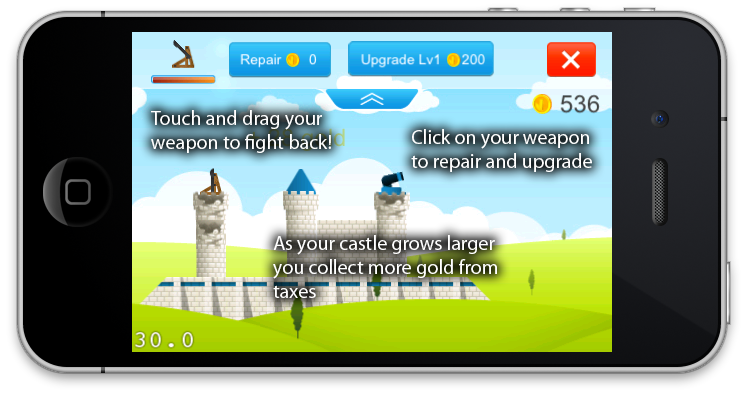
<style>
.page{position:relative;width:744px;height:396px}
.page>*{position:absolute;margin:0}
.t1{font:20px "MyriadPro-Regular";color:#ffffff}
</style>
<div class="page">
<p class="t1" style="left:151px;top:110px;width:180px;height:43px">Touch and drag your <br>weapon to fight back!</p>
<p class="t1" style="left:411px;top:129px;width:181px;height:43px">Click on your weapon<br>to repair and upgrade</p>
<p class="t1" style="left:273px;top:235px;width:224px;height:63px">As your castle grows larger<br>you collect more gold from<br>taxes</p>
</div>
